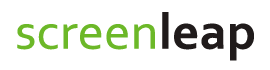
<style>
.page{position:relative;width:270px;height:70px;background:#ffffff}
.page>*{position:absolute;margin:0}
.t1{font:51.6px "Corbel";color:#6cb828;scale:1.03 1}
.t2{font:51.6px "Corbel-Bold";color:#201b1b;scale:1.03 1}
</style>
<div class="page">
<p class="t1" style="left:17px;top:12px;width:237px;height:49px">screen<span class="t2">leap</span></p>
</div>
